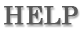
<style>
.page{position:relative;width:80px;height:30px;background:#ffffff}
.page>*{position:absolute;margin:0}
.t1{font:25px "Century";letter-spacing:0.01em;color:#595959;font-weight:bold}
</style>
<div class="page">
<p class="t1" style="left:4px;top:6px;width:74px;height:19px">HELP</p>
</div>
